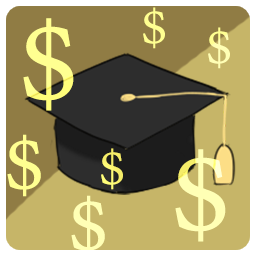
<style>
.page{position:relative;width:256px;height:256px;background:#c6b568}
.page>*{position:absolute;margin:0}
.t1{font:66px "AdobeDevanagari-Regular";letter-spacing:0.05em;color:#ffff91}
.t2{font:150px "AdobeDevanagari-Regular";letter-spacing:0.05em;color:#ffff91}
.t3{font:66px "AdobeDevanagari-Regular";letter-spacing:0.05em;color:#ffffb5}
.t4{font:100px "AdobeDevanagari-Regular";letter-spacing:0.05em;color:#ffff91}
.t5{font:66px "AdobeDevanagari-Regular";letter-spacing:0.05em;color:#f9f16d}
.t6{font:150px "AdobeDevanagari-Regular";letter-spacing:0.05em;color:#ffffb5}
.t7{font:100px "AdobeDevanagari-Regular";letter-spacing:0.05em;color:#ffffb5}
</style>
<div class="page">
<p class="t1" style="left:143px;top:7px;width:22px;height:42px">$</p>
<p class="t2" style="left:23px;top:18px;width:51px;height:93px">$</p>
<p class="t3" style="left:208px;top:27px;width:22px;height:42px">$</p>
<p class="t4" style="left:7px;top:134px;width:34px;height:63px">$</p>
<p class="t5" style="left:101px;top:148px;width:22px;height:42px">$</p>
<p class="t6" style="left:175px;top:149px;width:51px;height:93px">$</p>
<p class="t7" style="left:71px;top:195px;width:34px;height:63px">$</p>
</div>
